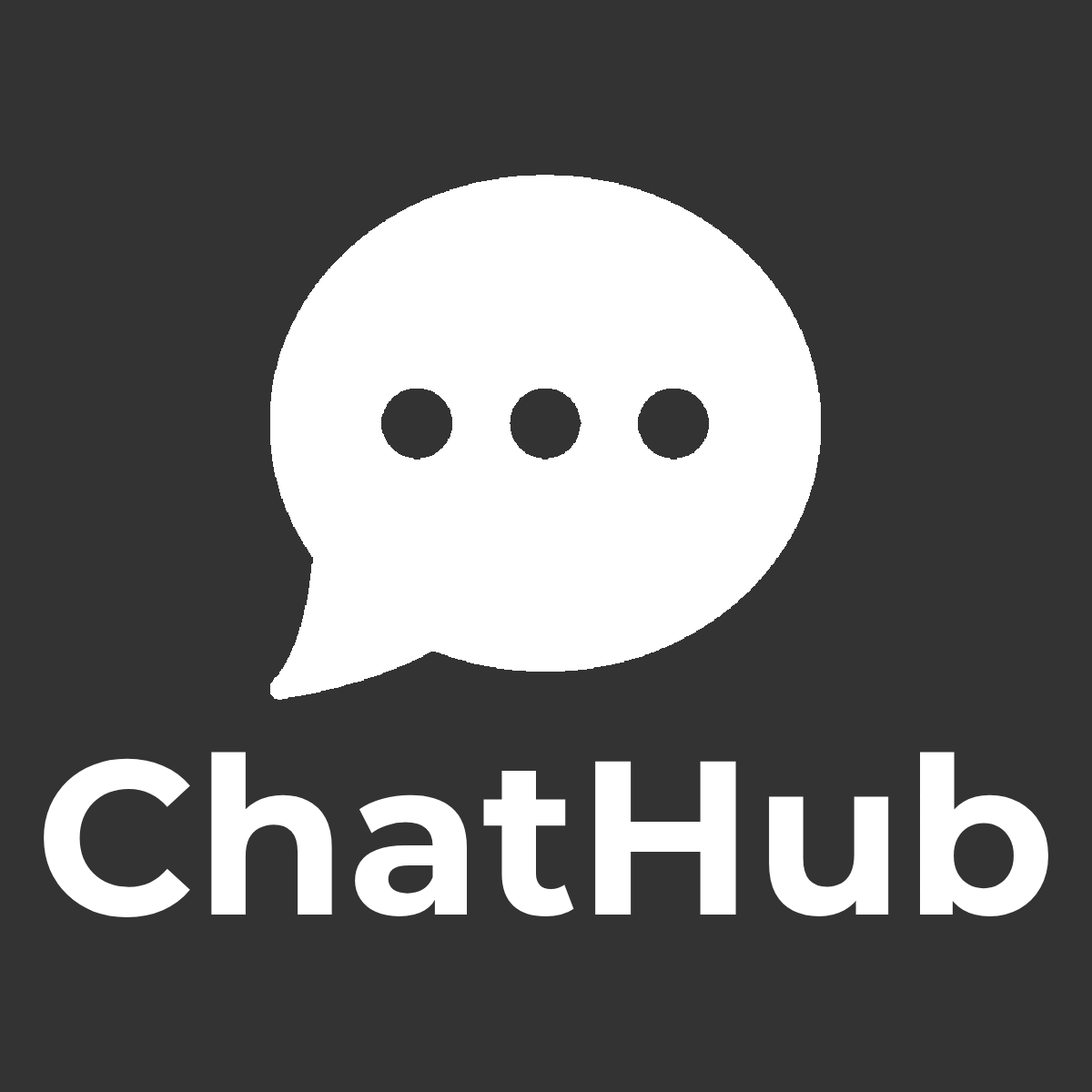
<style>
.page{position:relative;width:1092px;height:1092px;background:#333333}
.page>*{position:absolute;margin:0}
.t1{font:218.8px "Montserrat-Bold";color:#ffffff}
</style>
<div class="page">
<p class="t1" style="left:44px;top:752px;width:1004px;height:165px">ChatHub</p>
</div>
